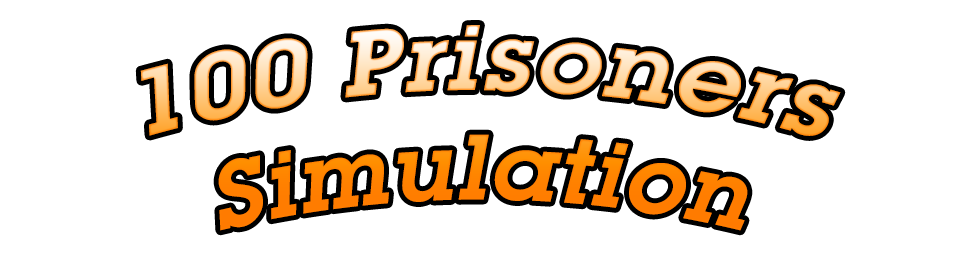
<style>
.page{position:relative;width:964px;height:256px;background:#ffffff}
.page>*{position:absolute;margin:0}
.t1{font:91.3px "LubalinGraphITCbyBT-Demi";letter-spacing:0.02em;font-style:italic}
</style>
<div class="page">
<p class="t1" style="left:140px;top:25px;width:701px;height:206px;text-align:center">100 Prisoners<br>Simulation</p>
</div>
